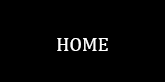
<style>
.page{position:relative;width:165px;height:82px;background:#000000}
.page>*{position:absolute;margin:0}
.t1{font:19.1px "Cambria";color:#ffffff}
</style>
<div class="page">
<p class="t1" style="left:57px;top:38px;width:51px;height:13px">HOME</p>
</div>
